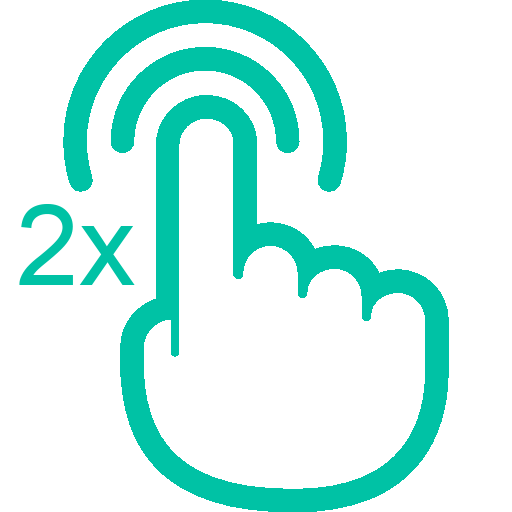
<style>
.page{position:relative;width:512px;height:512px;background:#ffffff}
.page>*{position:absolute;margin:0}
.t1{font:113.3px "ArialMT";color:#00c2a5}
</style>
<div class="page">
<p class="t1" style="left:19px;top:204px;width:116px;height:81px">2x</p>
</div>
